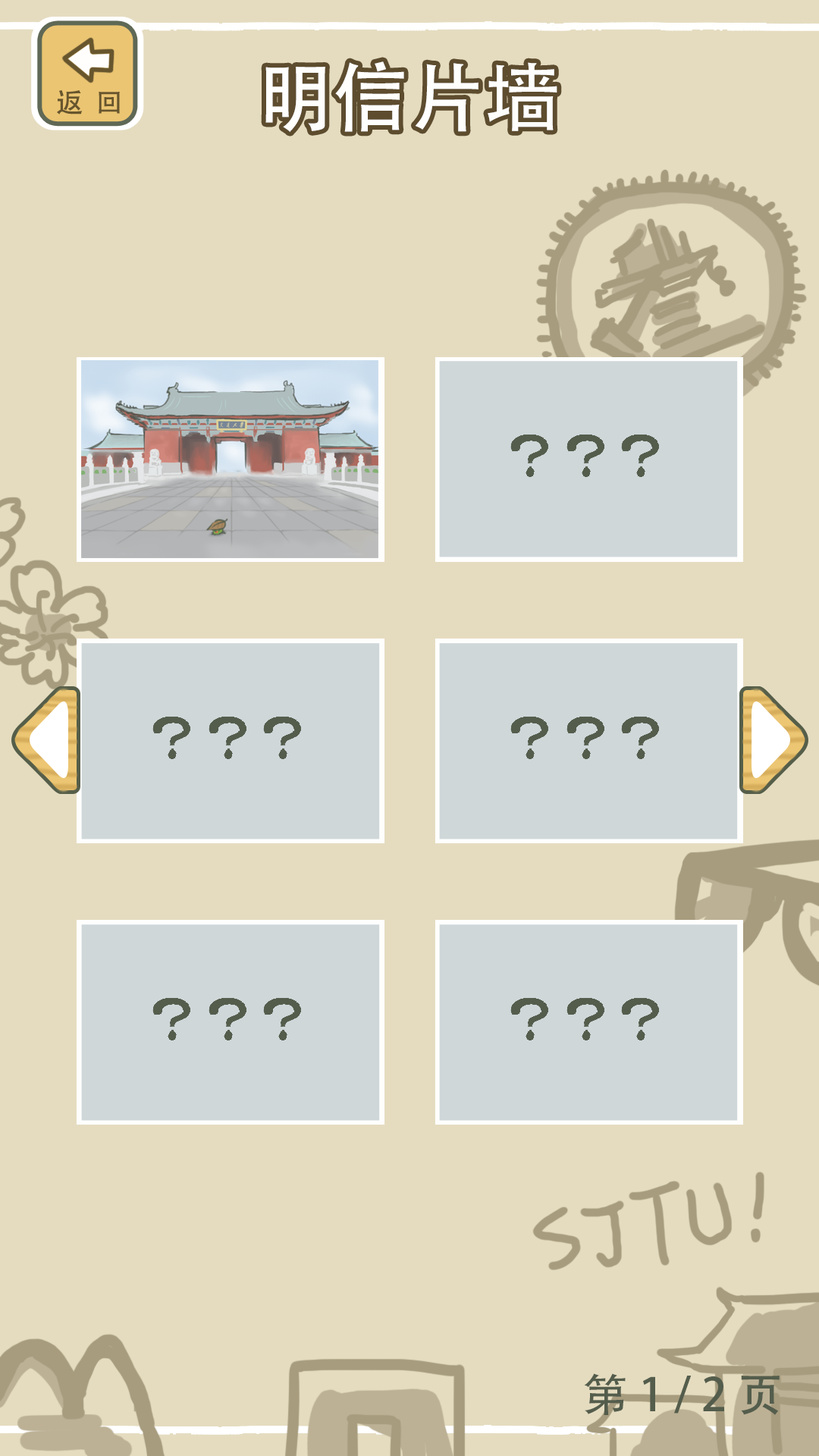
<style>
.page{position:relative;width:819px;height:1456px;background:#e5dcc0}
.page>*{position:absolute;margin:0}
.t1{font:75.8px "AdobeHeitiStd-Regular";color:#fefefd}
.t2{font:27.3px "AdobeHeitiStd-Regular";color:#67552d}
.t3{font:45.5px "AdobeHeitiStd-Regular";color:#545d4c}
</style>
<div class="page">
<p class="t1" style="left:265px;top:61px;width:292px;height:71px">明信片墙</p>
<p class="t2" style="left:57px;top:90px;width:63px;height:25px">返  回</p>
<p class="t3" style="left:584px;top:1373px;width:196px;height:42px">第 1 / 2 页</p>
</div>
